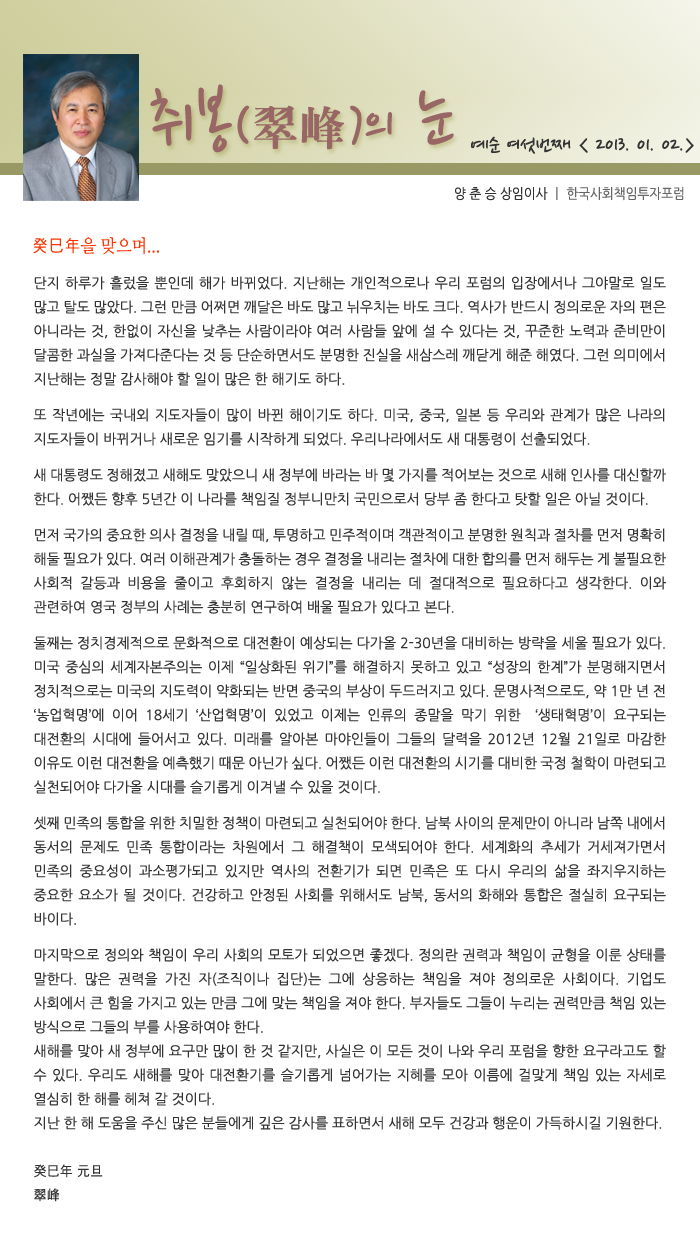
<style>
.page{position:relative;width:700px;height:1247px;background:#ffffff}
.page>*{position:absolute;margin:0}
.t1{font:77.5px "NanumPen";color:#996666}
.t2{font:60px "NanumPen";color:#996666}
.t3{font:48px "H2mjrE";color:#996666}
.t4{font:24px "NanumPen";color:#333333}
.t5{font:14px "NanumGothic";color:#666666;scale:0.9 1}
.t6{font:14px "NanumGothic";color:#333333;scale:0.9 1}
.t7{font:18px "NanumMyeongjo";color:#ff3300;scale:0.9 1}
.t8{font:18px "Gulim";color:#ff3300;scale:0.9 1}
.t9{font:14px/24px "NanumGothic";color:#333333}
.t10{font:14px/8px "NanumGothic";color:#333333}
.t11{font:14px/14px "NanumGothic";color:#333333}
.t12{font:14px/12px "NanumGothic";color:#333333}
</style>
<div class="page">
<p class="t1" style="left:150px;top:84px;width:304px;height:69px">취봉<span class="t2">(</span><span class="t3">翠峰</span><span class="t2">)</span><span class="t2">의</span> 눈</p>
<p class="t4" style="left:471px;top:136px;width:223px;height:18px">예순 여섯번째 &lt; 2013. 01. 02.&gt;</p>
<p class="t5" style="left:455px;top:187px;width:229px;height:14px"><span class="t6">양 춘 승 상임이사 </span>ㅣ 한국사회책임투자포럼</p>
<p class="t7" style="left:33px;top:237px;width:126px;height:18px"><span class="t8">癸巳年</span>을 맞으며...</p>
<p class="t9" style="left:33px;top:276px;width:633px;height:926px;text-align:justify">단지 하루가 흘렀을 뿐인데 해가 바뀌었다. 지난해는 개인적으로나 우리 포럼의 입장에서나 그야말로 일도 많고 탈도 많았다. 그런 만큼 어쩌면 깨달은 바도 많고 뉘우치는 바도 크다. 역사가 반드시 정의로운 자의 편은 아니라는 것, 한없이 자신을 낮추는 사람이라야 여러 사람들 앞에 설 수 있다는 것, 꾸준한 노력과 준비만이 달콤한 과실을 가져다준다는 것 등 단순하면서도 분명한 진실을 새삼스레 깨닫게 해준 해였다. 그런 의미에서 지난해는 정말 감사<span class="t10">해야 할</span><span class="t11"> 일이 많은 한</span><span class="t12"> 해기도 하다.<br><br>또 작년에는 국내외 지도자들이 많이 바</span>뀐 해이기도 하다. 미국, 중국, 일본 등 우리와 관계가 많은 나라의 지도자들이 바뀌거나 새로운 임기를 <span class="t12">시작하게 되었다. 우리나라에서도 새 대통령이 선출되었다. <br><br>새 대통령도 정해졌고 새해도 맞았으니 </span>새 정부에 바라는 바 몇 가지를 적어보는 것으로 새해 인사를 대신할까 한다. 어쨌든 향후 5년간 이 <span class="t12">나라를 책임질 정부니만치 국민으로서 당부 좀 한다고 탓할 일은 아닐 것이다.<br><br>먼저 국가의 중요한 의사 결정을 내</span>릴 때, 투명하고 민주적이며 객관적이고 분명한 원칙과 절차를 먼저 명확히 해둘 필요가 있다. 여러 이해관계가 충돌하는 경우 결정을 내리는 절차에 대한 합의를 먼저 해두는 게 불필요한 사회적 갈등과 비용을 줄이고 후회하지 않는 결정을 내리는 데 절대적으로 필요하다고 생각한다. 이와 관련하여 영국 정부의 사례는 충분히 연구하여 배울 필<span class="t12">요가 있다고 본다.<br><br>둘째는 정치경제적으로 문화적으로 대전환이 예상되는 다가올</span> 2-30년을 대비하는 방략을 세울 필요가 있다. 미국 중심의 세계자본주의는 이제 “일상화된 위기”를 해결하지 못하고 있고 “성장의 한계”가 분명해지면서 정치적으로는 미국의 지도력이 약화되는 반면 중국의 부상이 두드러지고 있다. 문명사적으로도, 약 1만 년 전 ‘농업혁명’에 이어 18세기 ‘산업혁명’이 있었고 이제는 인류의 종말을 막기 위한  ‘생태혁명’이 요구되는 대전환의 시대에 들어서고 있다. 미래를 알아본 마야인들이 그들의 달력을 2012년 12월 21일로 마감한 이유도 이런 대전환을 예측했기 때문 아닌가 싶다. 어쨌든 이런 대전환의 시기를 대비한 국정 철학이 마련되고 실천되어야 다가올 시대를 슬기롭게 이겨<span class="t12">낼 수 있을 것이다.<br><br>셋째 민족의 통합을 위한 치밀한 정책이 마련되</span>고 실천되어야 한다. 남북 사이의 문제만이 아니라 남쪽 내에서 동서의 문제도 민족 통합이라는 차원에서 그 해결책이 모색되어야 한다. 세계화의 추세가 거세져가면서 민족의 중요성이 과소평가되고 있지만 역사의 전환기가 되면 민족은 또 다시 우리의 삶을 좌지우지하는 중요한 요소가 될 것이다. 건강하고 안정된 사회를 위해서도 남북, 동서의 화해와 통합은 절실히 요구되는 바<span class="t12">이다.<br><br>마지막으로 정의와 책</span>임이 우리 사회의 모토가 되었으면 좋겠다. 정의란 권력과 책임이 균형을 이룬 상태를 말한다. 많은 권력을 가진 자(조직이나 집단)는 그에 상응하는 책임을 져야 정의로운 사회이다. 기업도 사회에서 큰 힘을 가지고 있는 만큼 그에 맞는 책임을 져야 한다. 부자들도 그들이 누리는 권력만큼 책임 있는 방식으로 그들의 부를 사용하여야 한다.<br>새해를 맞아 새 정부에 요구만 많이 한 것 같지만, 사실은 이 모든 것이 나와 우리 포럼을 향한 요구라고도 할 수 있다. 우리도 새해를 맞아 대전환기를 슬기롭게 넘어가는 지혜를 모아 이름에 걸맞게 책임 있는 자세로 열심히 한 해를 헤쳐 갈 것이다. <br>지난 한 해 도움을 주신 많은 분들에게 깊은 감사를 표하면서 새해 모두 건강과 행운이 가득하시길 기원한다.<br><br>癸巳年 元旦<br>翠峰</p>
</div>
